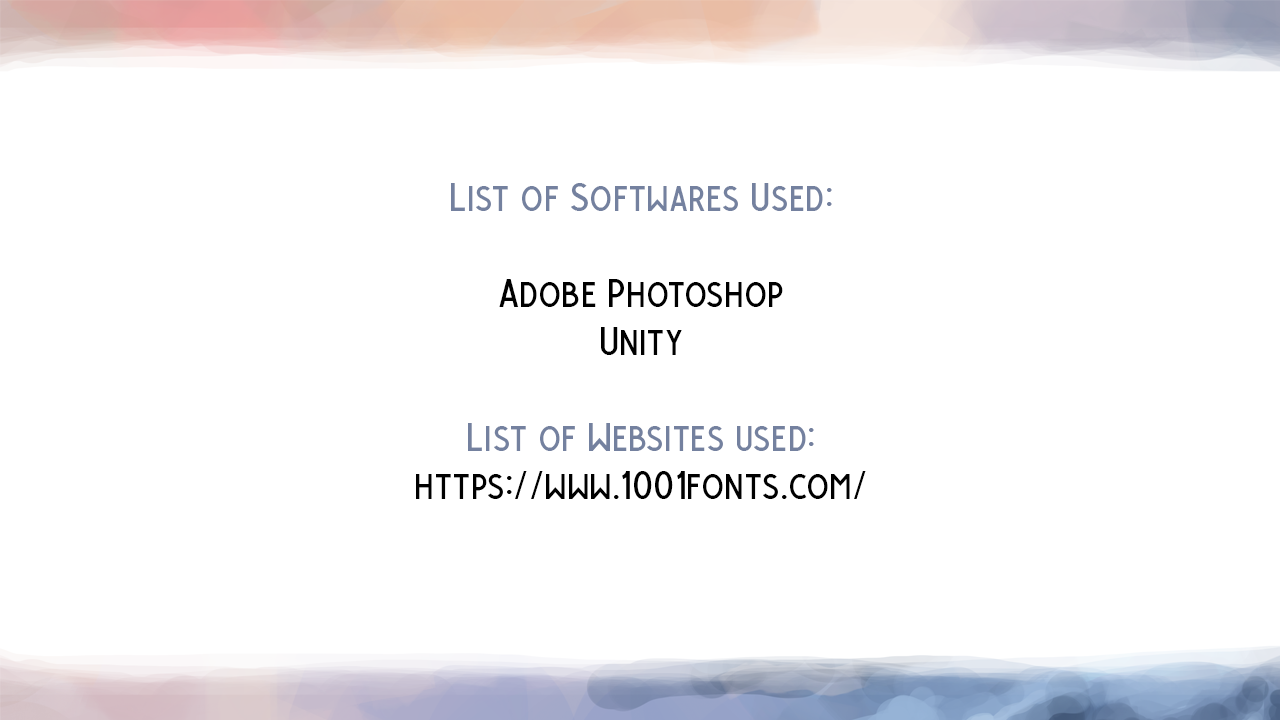
<style>
.page{position:relative;width:1280px;height:720px;background:#ffffff}
.page>*{position:absolute;margin:0}
.t1{font:40px "Unnamed-Regular";color:#74819f}
.t2{font:40px "Unnamed-Regular";color:#000000}
</style>
<div class="page">
<p class="t1" style="left:416px;top:183px;width:450px;height:316px;text-align:center">List of Softwares Used:​<br>​<br><span class="t2">Adobe Photoshop​<br>Unity​<br></span><br>List of Websites used:<br><span class="t2">https://www.1001fonts.com/</span></p>
</div>
